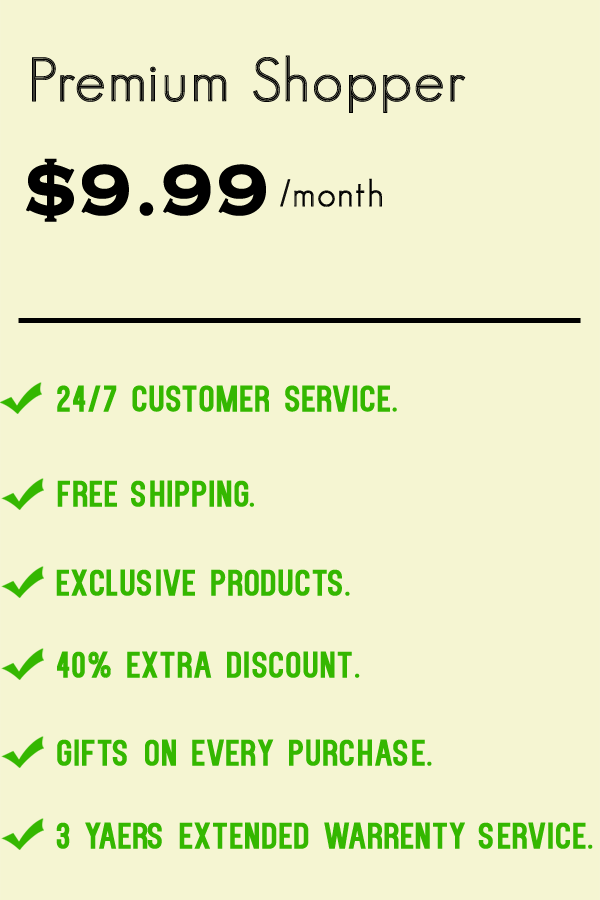
<style>
.page{position:relative;width:600px;height:900px;background:#f5f5d2}
.page>*{position:absolute;margin:0}
.t1{font:60px "GeosansLight";letter-spacing:0.03em;color:#000000;font-weight:bold}
.t2{font:72px "CopperplateGothic-Bold";letter-spacing:0.03em;color:#000000;font-weight:bold}
.t3{font:36px "GeosansLight";letter-spacing:0.03em;color:#000000;font-weight:bold}
.t4{font:36px "Kenzo";letter-spacing:0.03em;color:#34b700;font-weight:bold}
</style>
<div class="page">
<p class="t1" style="left:32px;top:55px;width:434px;height:58px">Premium Shopper</p>
<p class="t2" style="left:26px;top:158px;width:240px;height:64px">$9.99</p>
<p class="t3" style="left:280px;top:178px;width:102px;height:29px">/month</p>
<p class="t4" style="left:57px;top:385px;width:340px;height:27px">24/7 Customer Service.</p>
<p class="t4" style="left:57px;top:480px;width:197px;height:27px">free shipping.</p>
<p class="t4" style="left:56px;top:569px;width:294px;height:27px">exclusive products.</p>
<p class="t4" style="left:57px;top:651px;width:303px;height:27px">40% extra discount.</p>
<p class="t4" style="left:57px;top:739px;width:375px;height:27px">gifts on every purchase.</p>
<p class="t4" style="left:56px;top:822px;width:537px;height:27px">3 yaers extended warrenty service.</p>
</div>
